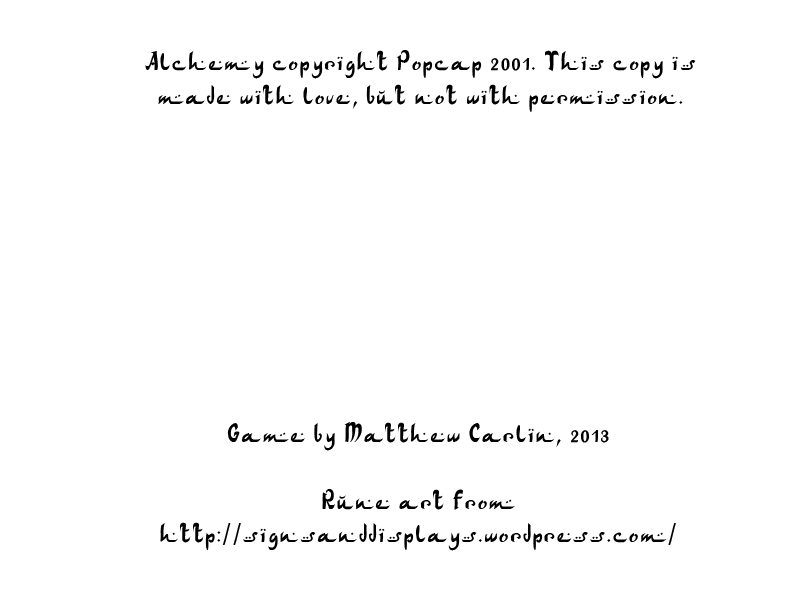
<style>
.page{position:relative;width:800px;height:600px;background:#ffffff}
.page>*{position:absolute;margin:0}
.t1{font:27.8px "ArabDancesMediumItalic";color:#000000}
</style>
<div class="page">
<p class="t1" style="left:145px;top:50px;width:551px;height:62px;text-align:center">Alchemy copyright Popcap 2001. This copy is made with love, but not with permission.</p>
<p class="t1" style="left:160px;top:422px;width:516px;height:129px;text-align:center">Game by Matthew Carlin, 2013<br><br>Rune art from http://signsanddisplays.wordpress.com/</p>
</div>
